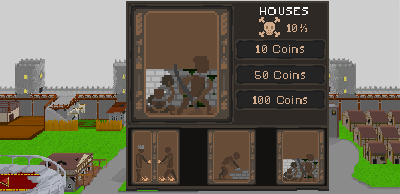
<style>
.page{position:relative;width:400px;height:194px}
.page>*{position:absolute;margin:0}
.t1{font:9.8px "Minecraft";letter-spacing:0.155em;color:#ffffff}
.t2{font:10.6px "Minecraft";letter-spacing:0.155em;color:#d3ac8d;scale:0.93 1}
.t3{font:10.6px "Minecraft";letter-spacing:0.155em;color:#d3ac8d;scale:0.91 1}
</style>
<div class="page">
<p class="t1" style="left:260px;top:7px;width:48px;height:8px">HOUSES</p>
<p class="t2" style="left:287px;top:24px;width:20px;height:8px">10%</p>
<p class="t3" style="left:256px;top:45px;width:48px;height:8px">10 Coins</p>
<p class="t3" style="left:255px;top:71px;width:50px;height:8px">50 Coins</p>
<p class="t3" style="left:253px;top:96px;width:54px;height:8px">100 Coins</p>
</div>
